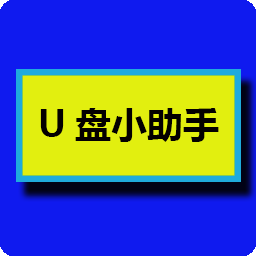
<style>
.page{position:relative;width:256px;height:256px;background:#0f1aef}
.page>*{position:absolute;margin:0}
.t1{font:36px "MicrosoftYaHei-Bold";color:#000000}
</style>
<div class="page">
<p class="t1" style="left:40px;top:108px;width:179px;height:34px">U盘小助手</p>
</div>
